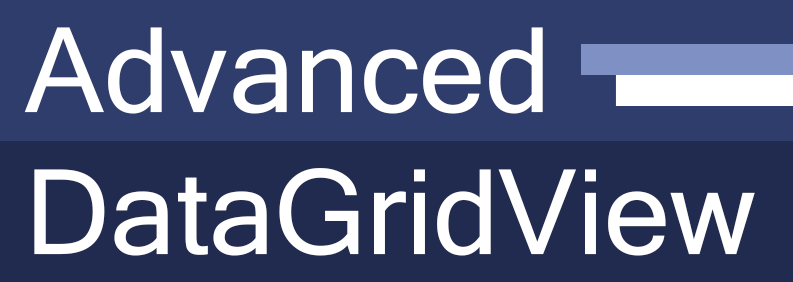
<style>
.page{position:relative;width:793px;height:282px;background:#202b4f}
.page>*{position:absolute;margin:0}
.t1{font:118.2px "MicrosoftSansSerif";color:#ffffff}
</style>
<div class="page">
<p class="t1" style="left:24px;top:27px;width:731px;height:229px">Advanced<br>DataGridView</p>
</div>
